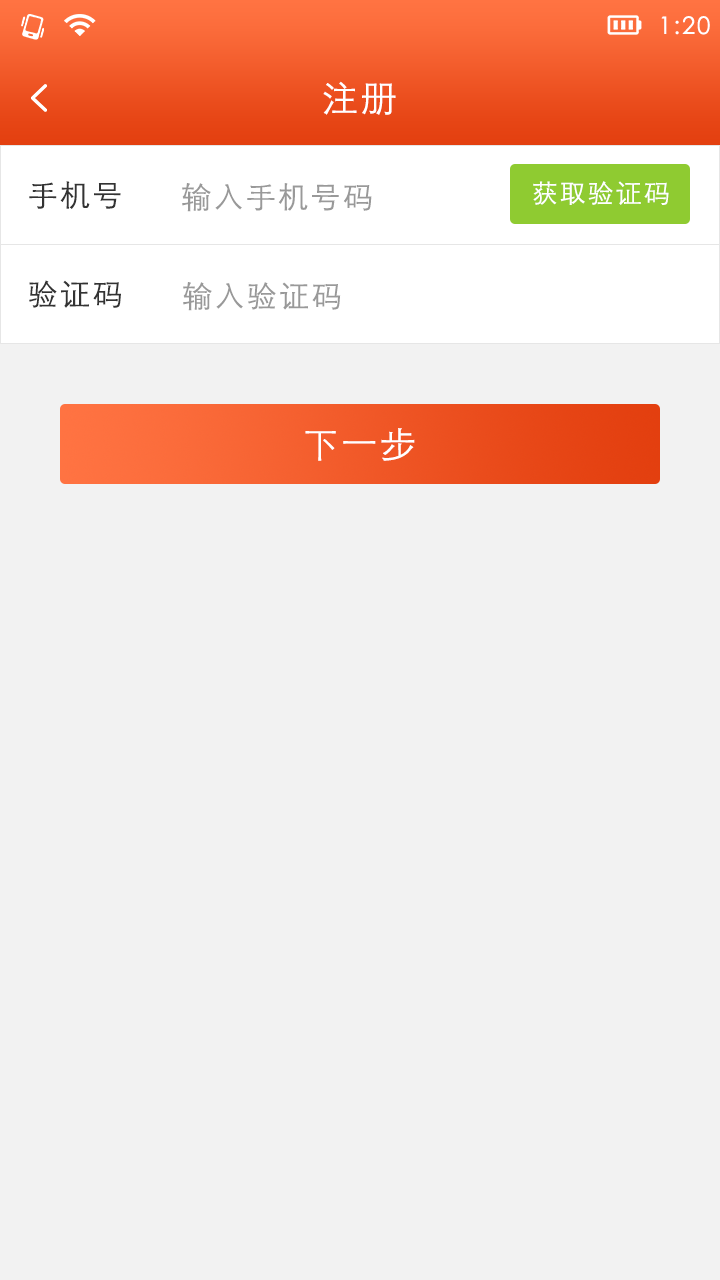
<style>
.page{position:relative;width:720px;height:1280px;background:#f2f2f2}
.page>*{position:absolute;margin:0}
.t1{font:24px "STXihei";letter-spacing:0.075em;color:#ffffff}
.t2{font:36px "STHeitiSC-Light";letter-spacing:0.075em;color:#ffffff}
.t3{font:30px "STHeitiSC-Light";letter-spacing:0.075em;color:#333333}
.t4{font:30px "STHeitiSC-Light";letter-spacing:0.075em;color:#999999}
.t5{font:26px "STHeitiSC-Light";letter-spacing:0.075em;color:#ffffff}
.t6{font:30px "STHeitiSC-Light";letter-spacing:0.075em;color:#999999;text-transform:uppercase}
</style>
<div class="page">
<p class="t1" style="left:661px;top:16px;width:49px;height:19px">1:20</p>
<p class="t2" style="left:323px;top:81px;width:73px;height:34px">注册</p>
<p class="t3" style="left:29px;top:181px;width:92px;height:28px">手机号</p>
<p class="t4" style="left:182px;top:183px;width:190px;height:29px">输入手机号码</p>
<p class="t5" style="left:533px;top:181px;width:136px;height:24px">获取验证码</p>
<p class="t3" style="left:29px;top:280px;width:92px;height:28px">验证码</p>
<p class="t6" style="left:183px;top:282px;width:158px;height:29px">输入验证码</p>
<p class="t2" style="left:305px;top:428px;width:110px;height:33px">下一步</p>
</div>
